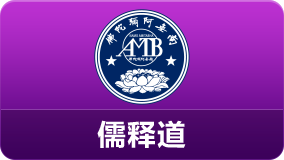
<style>
.page{position:relative;width:284px;height:160px}
.page>*{position:absolute;margin:0}
.t1{font:30px "FZLTCHK--GBK1-0";color:#ffffff}
</style>
<div class="page">
<p class="t1" style="left:97px;top:120px;width:89px;height:28px">儒释道</p>
</div>
